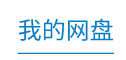
<style>
.page{position:relative;width:126px;height:60px;background:#ffffff}
.page>*{position:absolute;margin:0}
.t1{font:24px "SourceHanSansCN-Regular";color:#057bc6;text-decoration:underline}
</style>
<div class="page">
<p class="t1" style="left:17px;top:18px;width:97px;height:36px">我的网盘</p>
</div>
